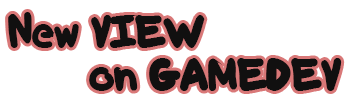
<style>
.page{position:relative;width:350px;height:109px;background:#ffffff}
.page>*{position:absolute;margin:0}
.t1{font:36px "TRENDY";color:#111010}
</style>
<div class="page">
<p class="t1" style="left:8px;top:12px;width:334px;height:79px">New VIEW <br>       on GAMEDEV</p>
</div>
